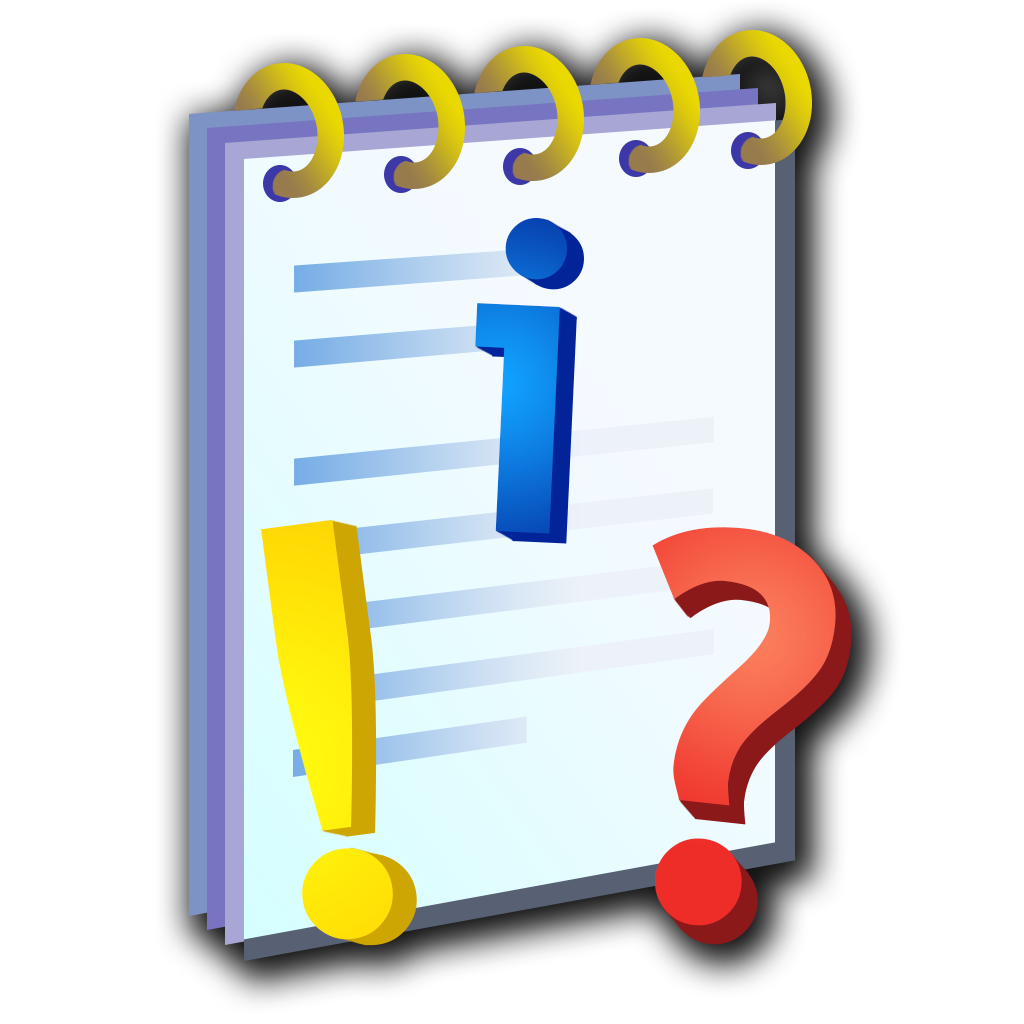
<style>
.page{position:relative;width:1024px;height:1024px;background:#ffffff}
.page>*{position:absolute;margin:0}
.t1{font:433.4px "TrebuchetMS-Bold";letter-spacing:-0.025em}
.t2{font:566.7px "TrebuchetMS-Bold";letter-spacing:-0.025em;color:#ffe909}
.t3{font:541.7px "TrebuchetMS-Bold";letter-spacing:-0.025em}
</style>
<div class="page">
<p class="t1" style="left:475px;top:218px;width:92px;height:316px;rotate:3deg">i</p>
<p class="t2" style="left:261px;top:519px;width:132px;height:421px;rotate:-8deg">!</p>
<p class="t3" style="left:652px;top:527px;width:184px;height:399px;rotate:6deg">?</p>
</div>
